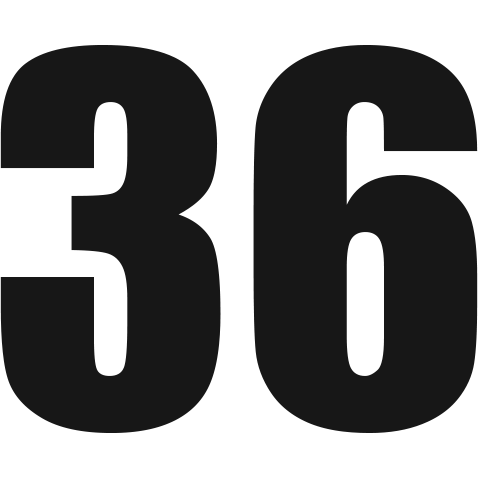
<style>
.page{position:relative;width:480px;height:480px;background:#171717}
.page>*{position:absolute;margin:0}
.t1{font:472.3px "Impact";color:#171717}
</style>
<div class="page">
<p class="t1" style="left:0px;top:45px;width:478px;height:388px">36</p>
</div>
